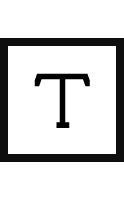
<style>
.page{position:relative;width:124px;height:200px;background:#ffffff}
.page>*{position:absolute;margin:0}
.t1{font:72px "BrosseDemonstrator";color:#000000}
</style>
<div class="page">
<p class="t1" style="left:34px;top:73px;width:56px;height:55px">T</p>
</div>
